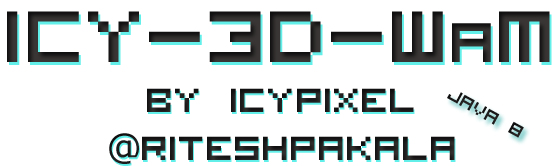
<style>
.page{position:relative;width:559px;height:166px;background:#ffffff}
.page>*{position:absolute;margin:0}
.t1{font:130px "VisitorTT2BRK";color:#2e2d2d}
.t2{font:100px "VisitorTT2BRK";color:#2e2d2d}
.t3{font:60px/24px "VisitorTT2BRK";color:#2e2d2d}
.t4{font:36px/24px "Verdana";color:#2e2d2d}
.t5{font:30px "VisitorTT2BRK";color:#2e2d2d}
</style>
<div class="page">
<p class="t1" style="left:7px;top:11px;width:543px;height:51px">icy-3D-w<span class="t2">a</span>m</p>
<p class="t3" style="left:109px;top:88px;width:346px;height:76px;text-align:center">by icypixel<br><br><span class="t4">@</span>riteshpakala</p>
<p class="t5" style="left:447px;top:92px;width:77px;height:46px;rotate:29deg">Java 8</p>
</div>
